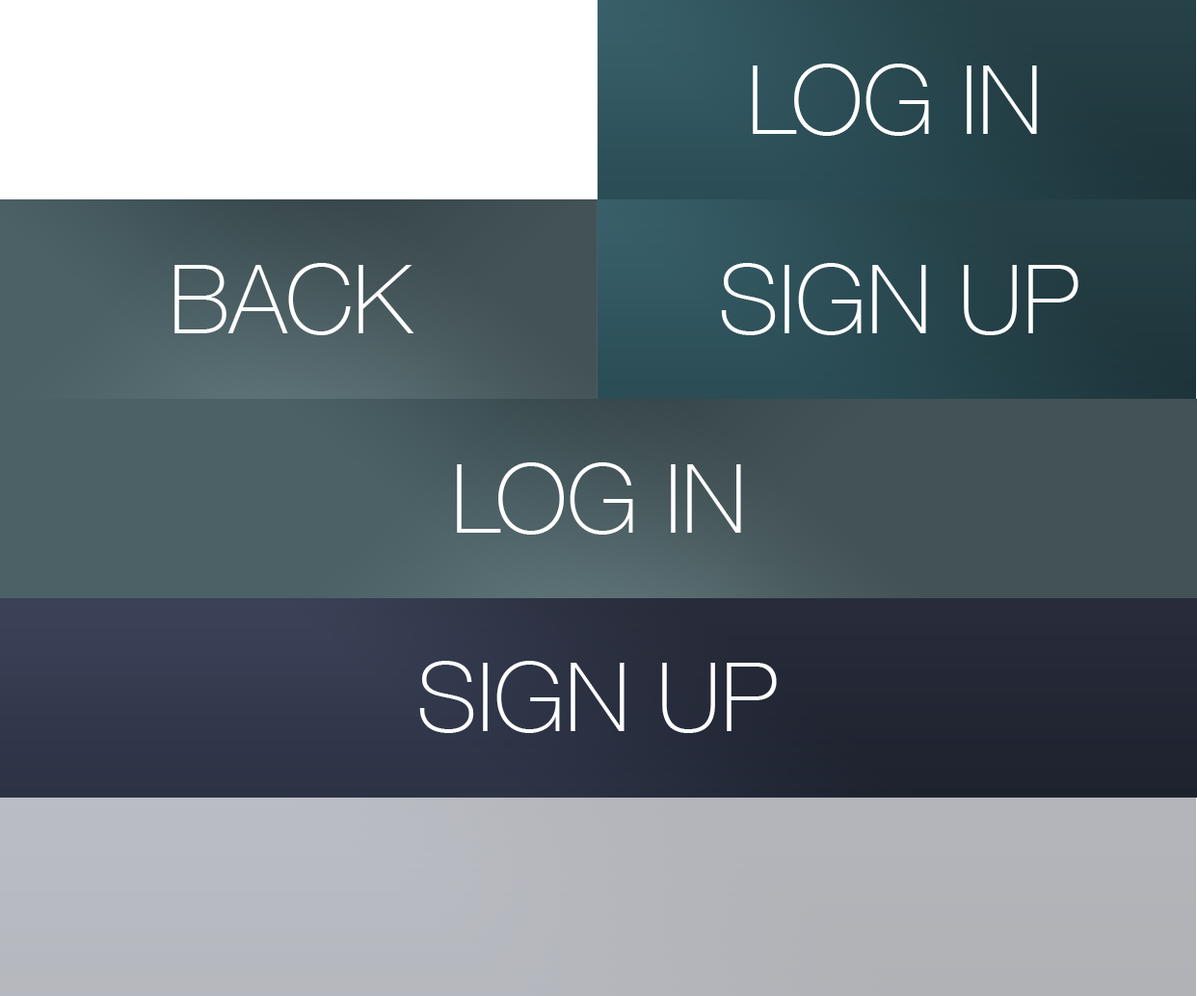
<style>
.page{position:relative;width:1197px;height:996px}
.page>*{position:absolute;margin:0}
.t1{font:96.4px "HelveticaNeue-Thin";color:#ffffff}
</style>
<div class="page">
<p class="t1" style="left:753px;top:64px;width:284px;height:72px">LOG IN</p>
<p class="t1" style="left:174px;top:263px;width:240px;height:72px">BACK</p>
<p class="t1" style="left:721px;top:263px;width:357px;height:72px">SIGN UP</p>
<p class="t1" style="left:457px;top:463px;width:284px;height:72px">LOG IN</p>
<p class="t1" style="left:419px;top:661px;width:358px;height:72px">SIGN UP</p>
</div>
